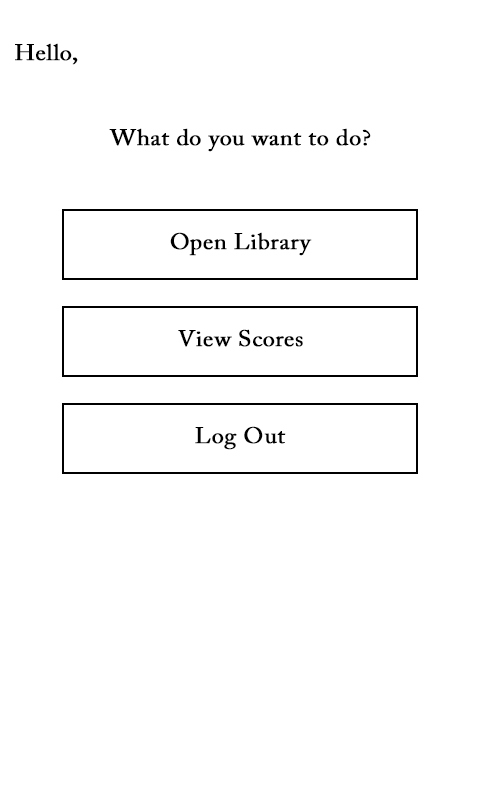
<style>
.page{position:relative;width:480px;height:800px;background:#ffffff}
.page>*{position:absolute;margin:0}
.t1{font:22.5px "ACaslonPro-Regular";color:#000000;font-weight:bold;scale:1.07 1}
</style>
<div class="page">
<p class="t1" style="left:15px;top:43px;width:63px;height:22px">Hello,</p>
<p class="t1" style="left:109px;top:128px;width:262px;height:24px">What do you want to do?</p>
<p class="t1" style="left:170px;top:232px;width:142px;height:24px">Open Library</p>
<p class="t1" style="left:178px;top:329px;width:125px;height:18px">View Scores</p>
<p class="t1" style="left:195px;top:426px;width:91px;height:24px">Log Out</p>
</div>
